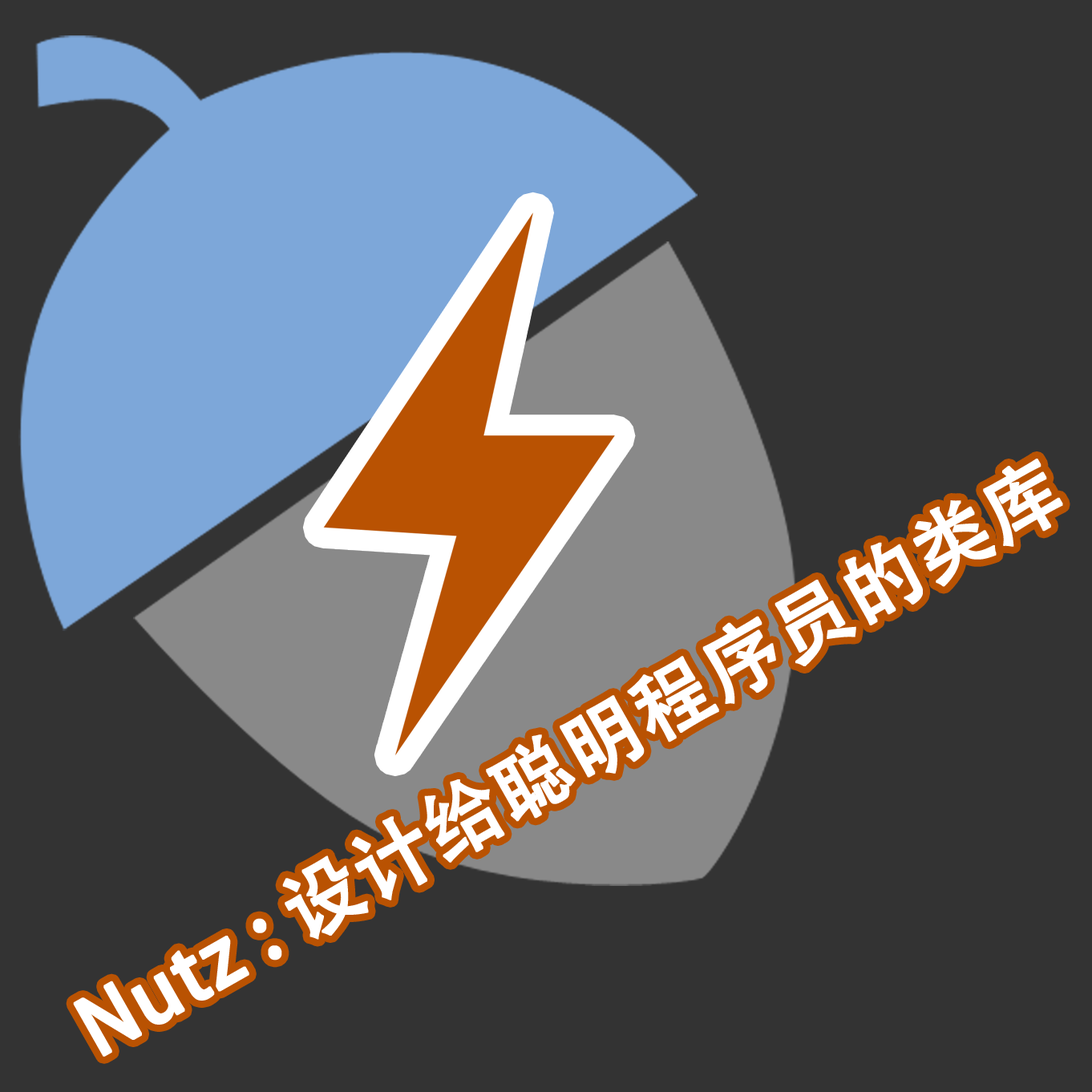
<style>
.page{position:relative;width:1092px;height:1092px;background:#333333}
.page>*{position:absolute;margin:0}
.t1{font:78.1px "AdobeHeitiStd-Regular";color:#ffffff;font-weight:bold}
</style>
<div class="page">
<p class="t1" style="left:73px;top:459px;width:990px;height:598px;rotate:-30deg">Nutz : 设计给聪明程序员的类库</p>
</div>
